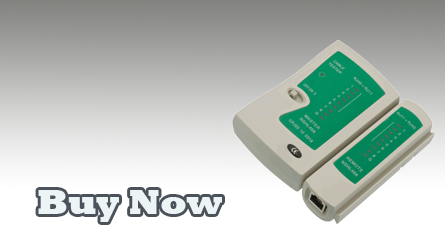
<style>
.page{position:relative;width:445px;height:250px}
.page>*{position:absolute;margin:0}
.t1{font:36px "Rockwell-ExtraBold";color:#ebf4f5}
</style>
<div class="page">
<p class="t1" style="left:38px;top:190px;width:184px;height:32px">Buy Now</p>
</div>
